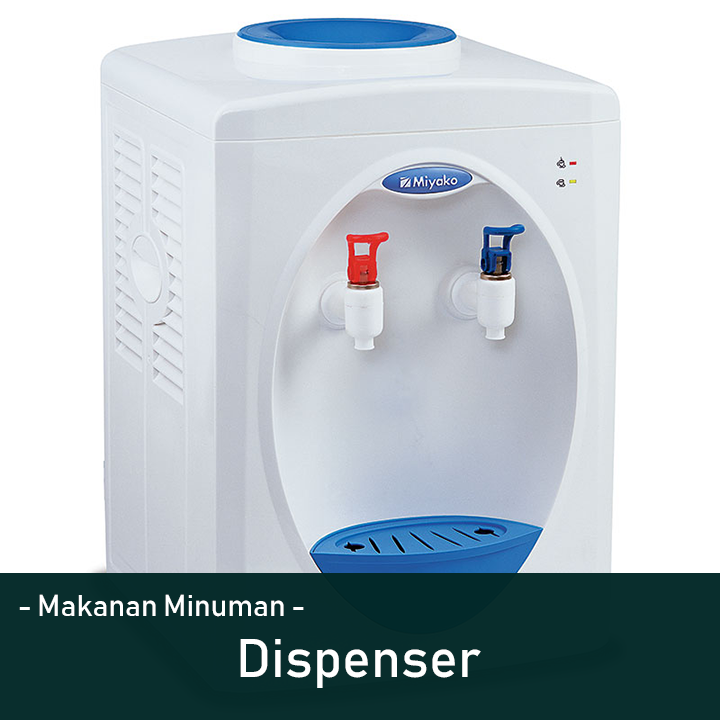
<style>
.page{position:relative;width:720px;height:720px;background:#ffffff}
.page>*{position:absolute;margin:0}
.t1{font:30px "Bahnschrift";color:#ffffff}
.t2{font:53.6px "Bahnschrift";color:#ffffff}
</style>
<div class="page">
<p class="t1" style="left:19px;top:594px;width:285px;height:23px">- Makanan Minuman -</p>
<p class="t2" style="left:240px;top:639px;width:241px;height:49px">Dispenser</p>
</div>
